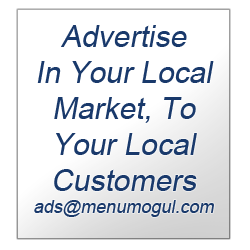
<style>
.page{position:relative;width:250px;height:250px;background:#ffffff}
.page>*{position:absolute;margin:0}
.t1{font:30px "ArialMT";color:#19396b;font-style:italic}
.t2{font:18px "ArialMT";color:#19396b;font-style:italic}
</style>
<div class="page">
<p class="t1" style="left:34px;top:25px;width:180px;height:192px;text-align:center">Advertise<br>In Your Local<br>Market, To<br>Your Local <br>Customers<br><span class="t2">ads@menumogul.com</span></p>
</div>
